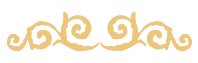
<style>
.page{position:relative;width:198px;height:63px;background:#ffffff}
.page>*{position:absolute;margin:0}
.t1{font:125.9px "Nymphette";letter-spacing:0.1em;color:#ecc67a}
</style>
<div class="page">
<p class="t1" style="left:7px;top:12px;width:185px;height:39px">T</p>
<p class="t1" style="left:7px;top:12px;width:185px;height:39px">T</p>
</div>
